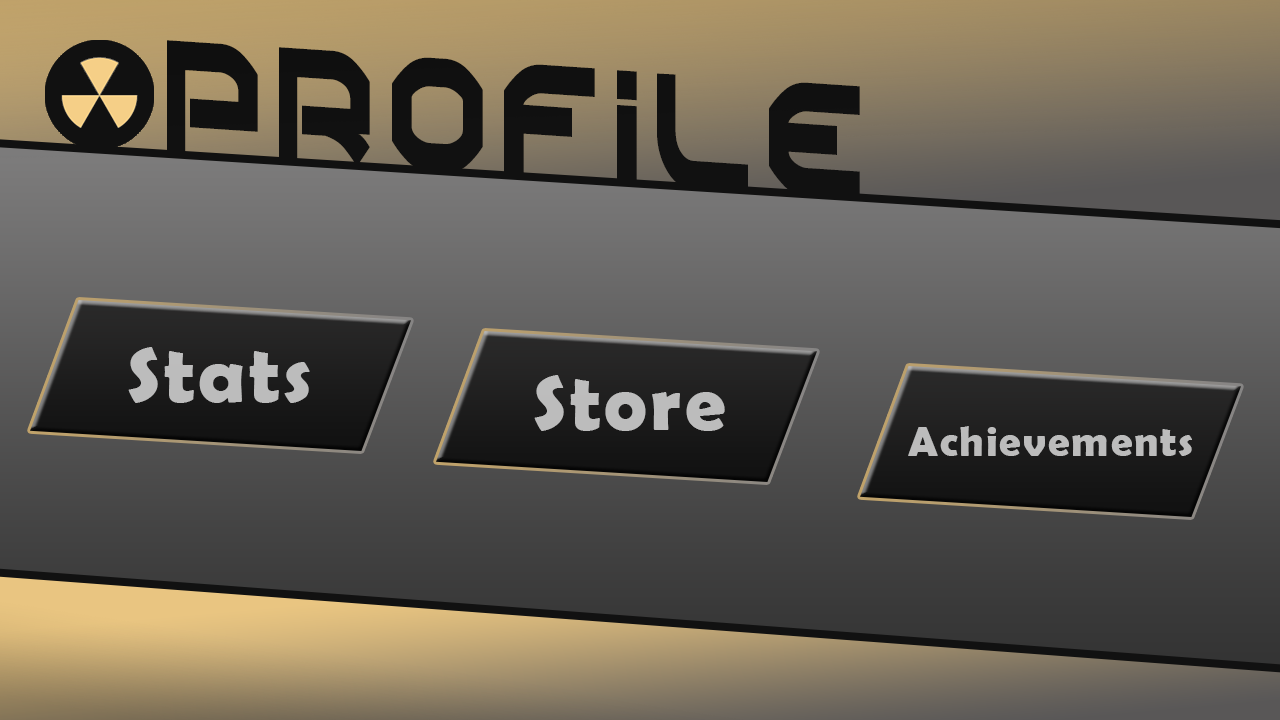
<style>
.page{position:relative;width:1280px;height:720px}
.page>*{position:absolute;margin:0}
.t1{font:145.5px "Oberon";letter-spacing:0.04em;color:#111111;scale:0.64 1}
.t2{font:78.7px "BerlinSansFBDemi-Bold";letter-spacing:0.04em;color:#bcbcbc;scale:1.03 1}
.t3{font:41.8px "BerlinSansFBDemi-Bold";letter-spacing:0.04em;color:#bcbcbc;scale:1.03 1}
</style>
<div class="page">
<p class="t1" style="left:167px;top:40px;width:693px;height:161px;rotate:4deg">Profile</p>
<p class="t2" style="left:128px;top:347px;width:182px;height:56px">Stats</p>
<p class="t2" style="left:534px;top:375px;width:191px;height:56px">Store</p>
<p class="t3" style="left:908px;top:426px;width:284px;height:30px">Achievements</p>
</div>
